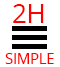
<style>
.page{position:relative;width:60px;height:67px;background:#ffffff}
.page>*{position:absolute;margin:0}
.t1{font:26px "OpenSans";letter-spacing:-0.02em;color:#ff0000;text-transform:uppercase}
.t2{font:15px "OpenSans";letter-spacing:-0.02em;color:#ff0000;text-transform:uppercase}
</style>
<div class="page">
<p class="t1" style="left:13px;top:4px;width:31px;height:19px">2h</p>
<p class="t2" style="left:5px;top:53px;width:49px;height:11px">Simple</p>
</div>
